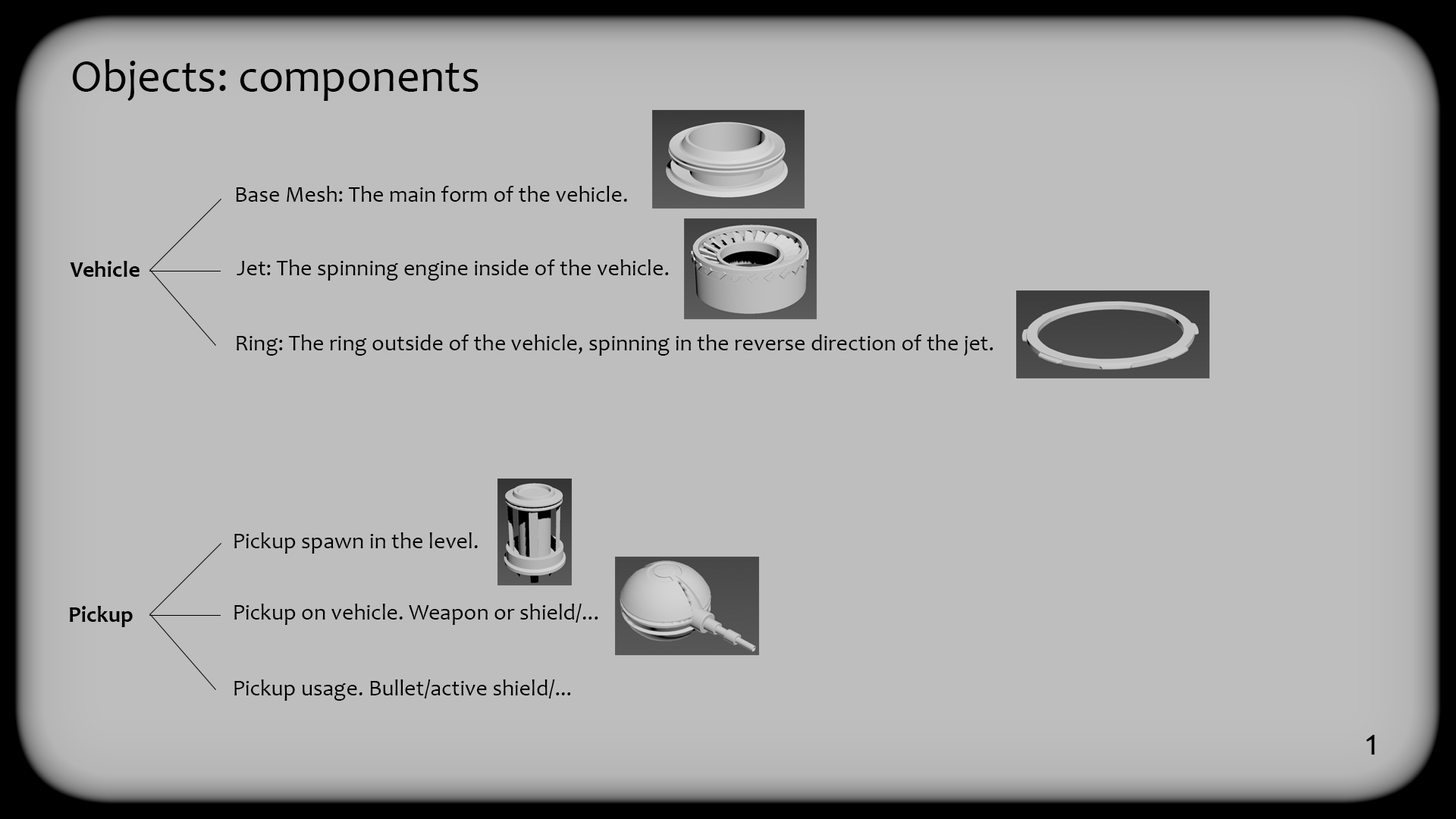
<style>
.page{position:relative;width:1456px;height:819px;background:#bebebe}
.page>*{position:absolute;margin:0}
.t1{font:45.5px "Candara";color:#010101}
.t2{font:22.7px "Candara";color:#000000}
.t3{font:22.7px "Candara-Bold";color:#000000}
.t4{font:37.9px "Candara";color:#000000}
</style>
<div class="page">
<p class="t1" style="left:72px;top:59px;width:407px;height:42px">Objects: components</p>
<p class="t2" style="left:236px;top:186px;width:391px;height:16px">Base Mesh: The main form of the vehicle.</p>
<p class="t3" style="left:70px;top:261px;width:70px;height:16px">Vehicle</p>
<p class="t2" style="left:237px;top:259px;width:432px;height:22px">Jet: The spinning engine inside of the vehicle.</p>
<p class="t2" style="left:237px;top:334px;width:756px;height:22px">Ring: The ring outside of the vehicle, spinning in the reverse direction of the jet.</p>
<p class="t2" style="left:234px;top:532px;width:244px;height:22px">Pickup spawn in the level.</p>
<p class="t3" style="left:70px;top:606px;width:63px;height:21px">Pickup</p>
<p class="t2" style="left:234px;top:604px;width:364px;height:21px">Pickup on vehicle. Weapon or shield/...</p>
<p class="t2" style="left:234px;top:679px;width:337px;height:22px">Pickup usage. Bullet/active shield/...</p>
<p class="t4" style="left:1366px;top:735px;width:9px;height:20px">1</p>
</div>
